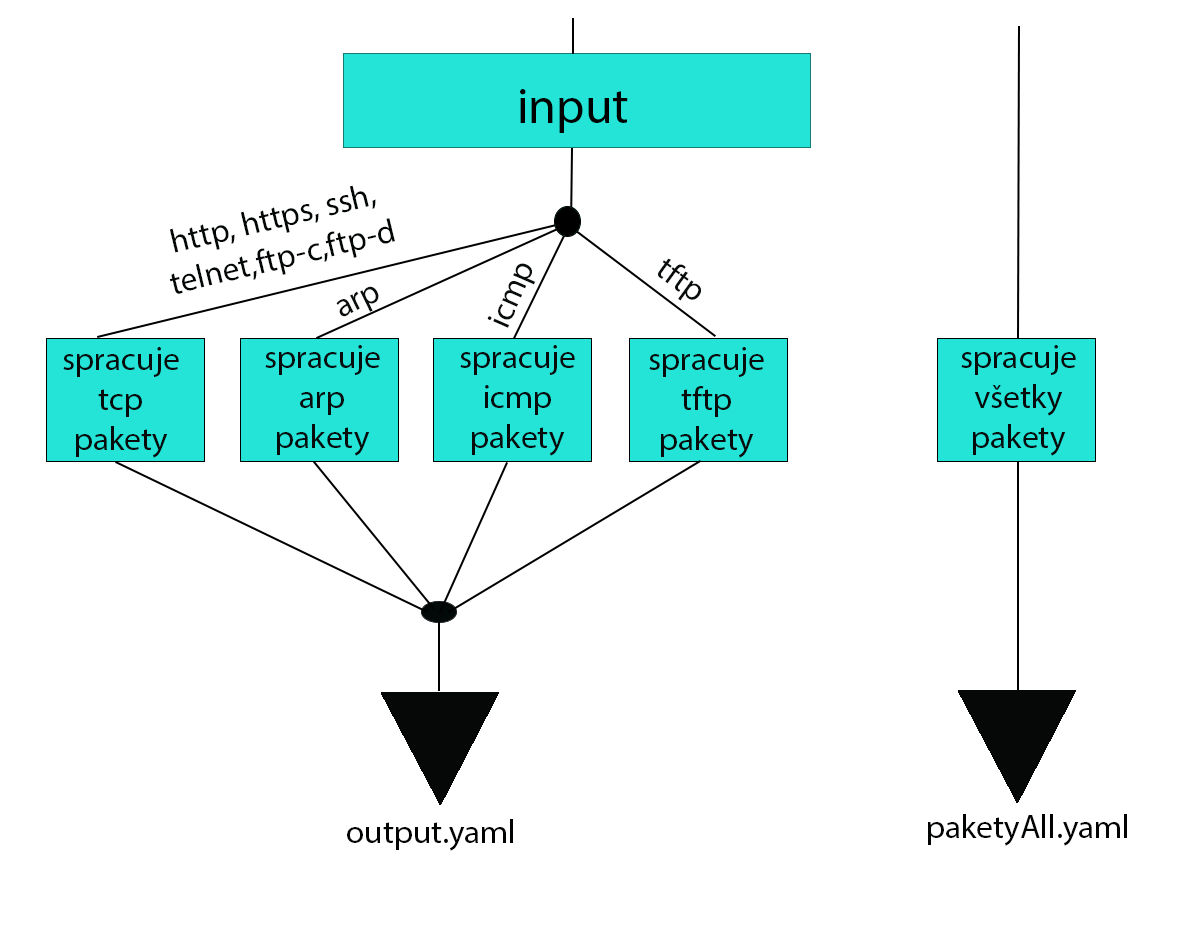
<style>
.page{position:relative;width:1181px;height:945px;background:#ffffff}
.page>*{position:absolute;margin:0}
.t1{font:50px "MyriadPro-Regular";color:#000000}
.t2{font:33.3px "MyriadPro-Regular";color:#030606}
.t3{font:33.3px "MyriadPro-Regular";color:#090c0c}
.t4{font:33.3px "MyriadPro-Regular";color:#010202}
</style>
<div class="page">
<p class="t1" style="left:520px;top:89px;width:108px;height:44px">input</p>
<p class="t2" style="left:169px;top:185px;width:226px;height:109px;rotate:-14deg">http, https, ssh, telnet,ftp-c,ftp-d</p>
<p class="t3" style="left:487px;top:263px;width:49px;height:65px;rotate:-66deg">icmp</p>
<p class="t3" style="left:658px;top:258px;width:43px;height:43px;rotate:36deg">tftp</p>
<p class="t3" style="left:336px;top:286px;width:43px;height:31px;rotate:-26deg">arp</p>
<p class="t3" style="left:63px;top:347px;width:116px;height:111px;text-align:center">spracuje tcp<br>pakety</p>
<p class="t3" style="left:265px;top:345px;width:115px;height:111px;text-align:center">spracuje<br>arp pakety</p>
<p class="t3" style="left:460px;top:345px;width:115px;height:111px;text-align:center">spracuje icmp<br>pakety</p>
<p class="t3" style="left:649px;top:347px;width:115px;height:111px;text-align:center">spracuje tftp<br>pakety</p>
<p class="t3" style="left:961px;top:345px;width:115px;height:111px;text-align:center">spracujevšetky pakety</p>
<p class="t4" style="left:347px;top:819px;width:166px;height:32px">output.yaml</p>
<p class="t4" style="left:928px;top:814px;width:199px;height:32px">paketyAll.yaml</p>
</div>
